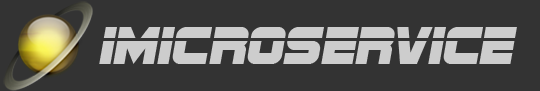
<style>
.page{position:relative;width:540px;height:91px;background:#333333}
.page>*{position:absolute;margin:0}
.t1{font:56px "SFSportsNight";color:#cdcdcd}
</style>
<div class="page">
<p class="t1" style="left:99px;top:27px;width:418px;height:37px">iMicroService</p>
</div>
